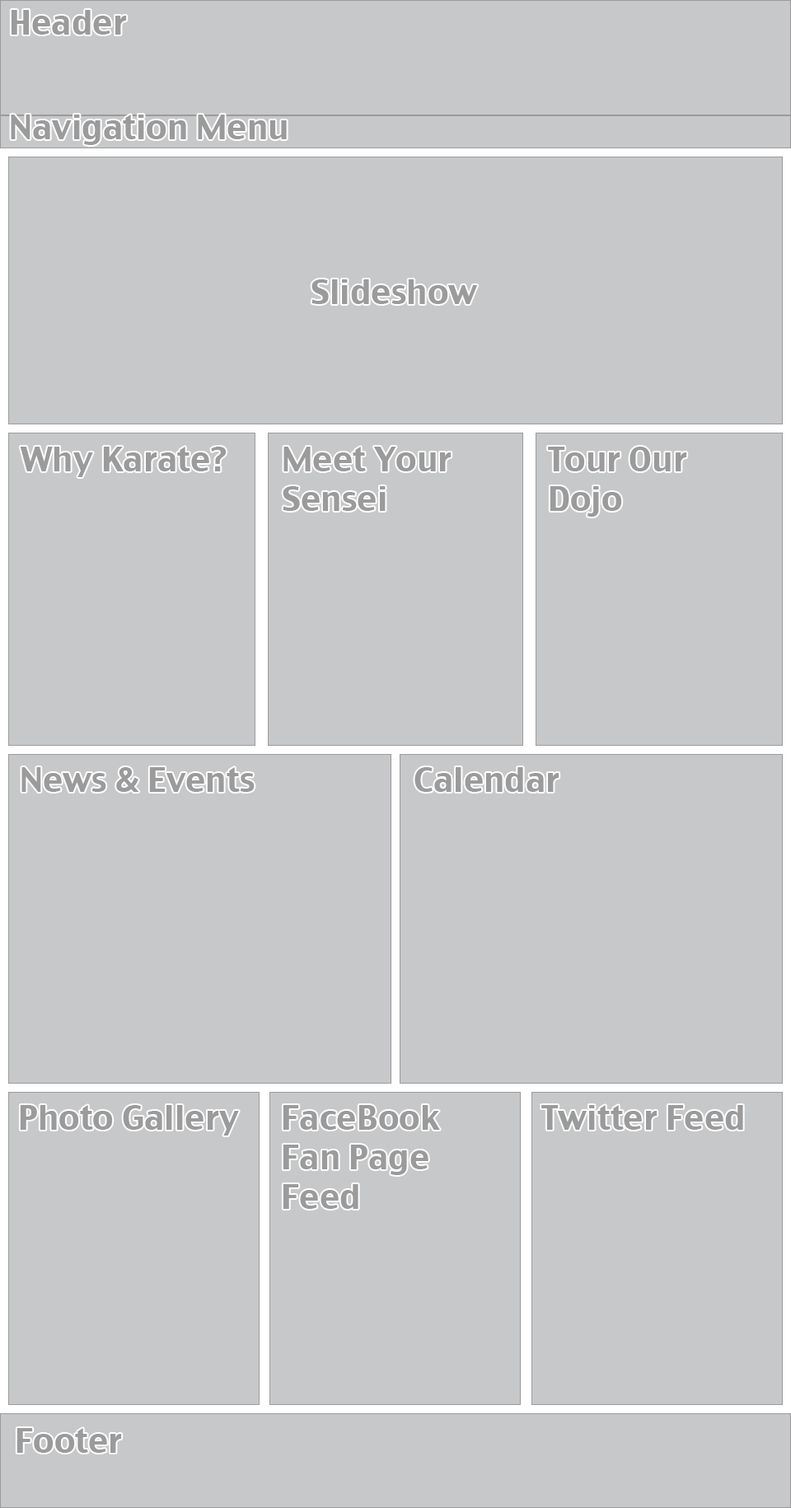
<style>
.page{position:relative;width:791px;height:1508px;background:#c7c8ca}
.page>*{position:absolute;margin:0}
.t1{font:33px "CharcoalCY";color:#9b9b9c}
</style>
<div class="page">
<p class="t1" style="left:11px;top:10px;width:116px;height:25px">Header</p>
<p class="t1" style="left:11px;top:115px;width:276px;height:30px">Navigation Menu</p>
<p class="t1" style="left:311px;top:279px;width:167px;height:25px">Slideshow</p>
<p class="t1" style="left:20px;top:447px;width:207px;height:30px">Why Karate?</p>
<p class="t1" style="left:283px;top:447px;width:168px;height:64px">Meet Your<br>Sensei</p>
<p class="t1" style="left:548px;top:447px;width:139px;height:70px">Tour Our<br>Dojo</p>
<p class="t1" style="left:21px;top:767px;width:234px;height:25px">News &amp; Events</p>
<p class="t1" style="left:414px;top:767px;width:145px;height:25px">Calendar</p>
<p class="t1" style="left:20px;top:1105px;width:219px;height:30px">Photo Gallery</p>
<p class="t1" style="left:283px;top:1105px;width:157px;height:104px">FaceBook<br>Fan Page<br>Feed</p>
<p class="t1" style="left:541px;top:1105px;width:202px;height:25px">Twitter Feed</p>
<p class="t1" style="left:16px;top:1428px;width:106px;height:24px">Footer</p>
</div>
